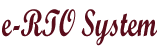
<style>
.page{position:relative;width:160px;height:55px;background:#ffffff}
.page>*{position:absolute;margin:0}
.t1{font:38.2px "ScriptMTBold";color:#5a0d1b;scale:0.7 1}
</style>
<div class="page">
<p class="t1" style="left:2px;top:9px;width:155px;height:37px">e-RTO System</p>
</div>
